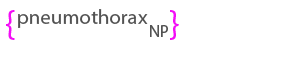
<style>
.page{position:relative;width:300px;height:60px;background:#ffffff}
.page>*{position:absolute;margin:0}
.t1{font:37.5px "MyriadPro-Regular";color:#f30df6}
.t2{font:20.8px "MyriadPro-Regular";color:#525252}
.t3{font:16.7px "MyriadPro-Regular";color:#525252}
</style>
<div class="page">
<p class="t1" style="left:6px;top:10px;width:9px;height:30px">{</p>
<p class="t2" style="left:18px;top:9px;width:130px;height:19px">pneumothorax</p>
<p class="t1" style="left:170px;top:10px;width:9px;height:30px">}</p>
<p class="t3" style="left:150px;top:25px;width:18px;height:12px">NP</p>
</div>
